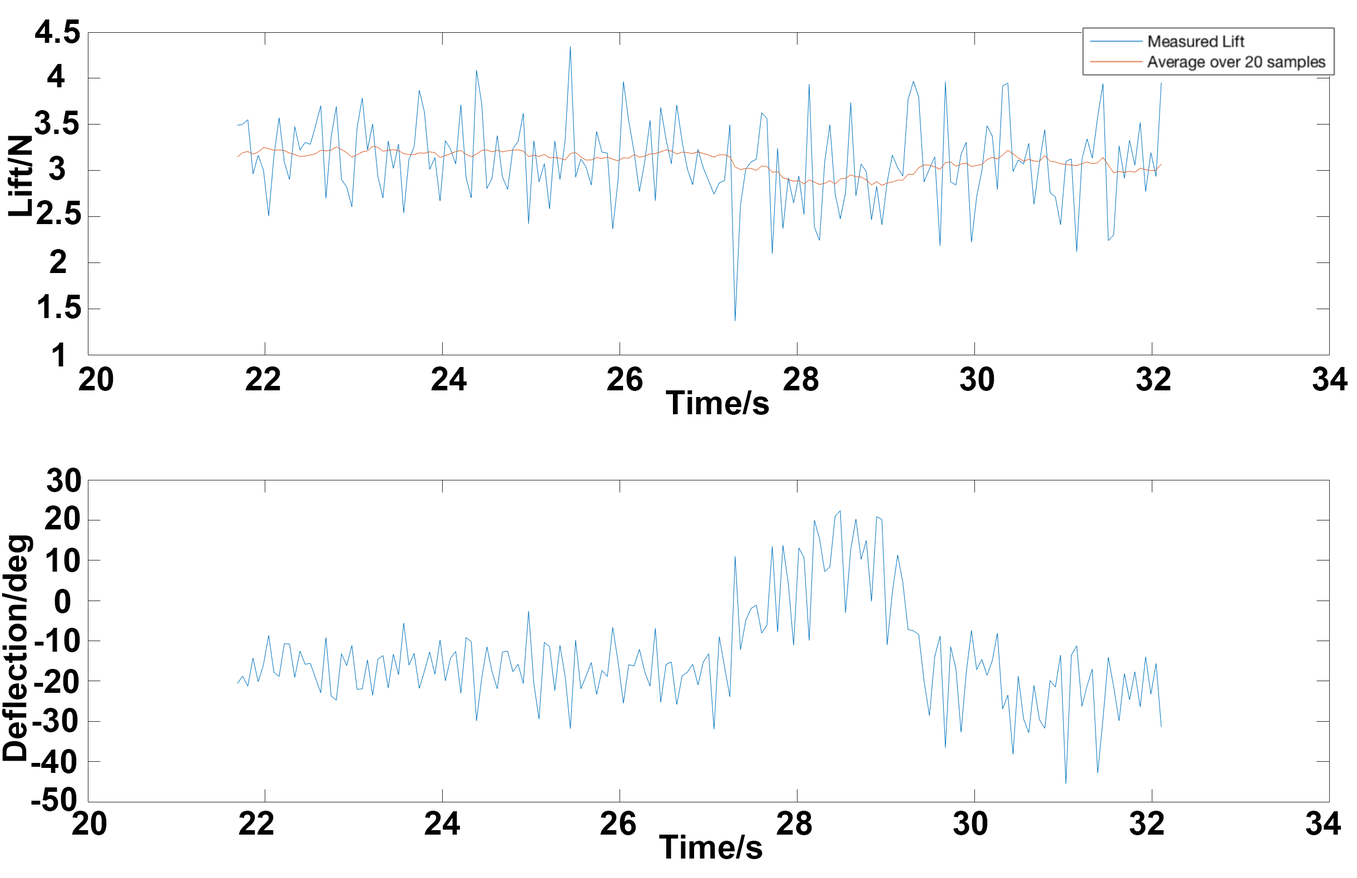
<style>
.page{position:relative;width:1357px;height:878px;background:#ffffff}
.page>*{position:absolute;margin:0}
.t1{font:33.4px "Arial-BoldMT";color:#000000}
.t2{font:33.2px "Arial-BoldMT";color:#000000}
.t3{font:33.3px "Arial-BoldMT";color:#000000}
</style>
<div class="page">
<p class="t1" style="left:35px;top:19px;width:45px;height:24px">4.5</p>
<p class="t1" style="left:47px;top:64px;width:18px;height:23px">4</p>
<p class="t1" style="left:34px;top:110px;width:45px;height:25px">3.5</p>
<p class="t2" style="left:7px;top:136px;width:25px;height:80px;rotate:-90deg">Lift/N</p>
<p class="t1" style="left:49px;top:156px;width:16px;height:24px">3</p>
<p class="t1" style="left:36px;top:200px;width:45px;height:25px">2.5</p>
<p class="t1" style="left:50px;top:249px;width:16px;height:24px">2</p>
<p class="t2" style="left:38px;top:294px;width:43px;height:25px">1.5</p>
<p class="t1" style="left:52px;top:343px;width:11px;height:24px">1</p>
<p class="t1" style="left:78px;top:367px;width:1270px;height:24px">20              22                24               26               28               30               32               34</p>
<p class="t1" style="left:666px;top:391px;width:103px;height:24px">Time/s</p>
<p class="t1" style="left:47px;top:468px;width:34px;height:24px">30</p>
<p class="t1" style="left:45px;top:506px;width:35px;height:24px">20</p>
<p class="t3" style="left:2px;top:536px;width:31px;height:226px;rotate:-90deg">Deflection/deg</p>
<p class="t1" style="left:46px;top:548px;width:34px;height:24px">10</p>
<p class="t1" style="left:55px;top:589px;width:16px;height:25px">0</p>
<p class="t1" style="left:34px;top:628px;width:46px;height:25px">-10</p>
<p class="t1" style="left:34px;top:669px;width:45px;height:25px">-20</p>
<p class="t1" style="left:32px;top:708px;width:46px;height:25px">-30</p>
<p class="t1" style="left:31px;top:749px;width:46px;height:25px">-40</p>
<p class="t1" style="left:31px;top:787px;width:46px;height:25px">-50</p>
<p class="t1" style="left:72px;top:811px;width:1269px;height:25px">20              22                24               26               28               30               32               34</p>
<p class="t1" style="left:659px;top:835px;width:104px;height:25px">Time/s</p>
</div>
